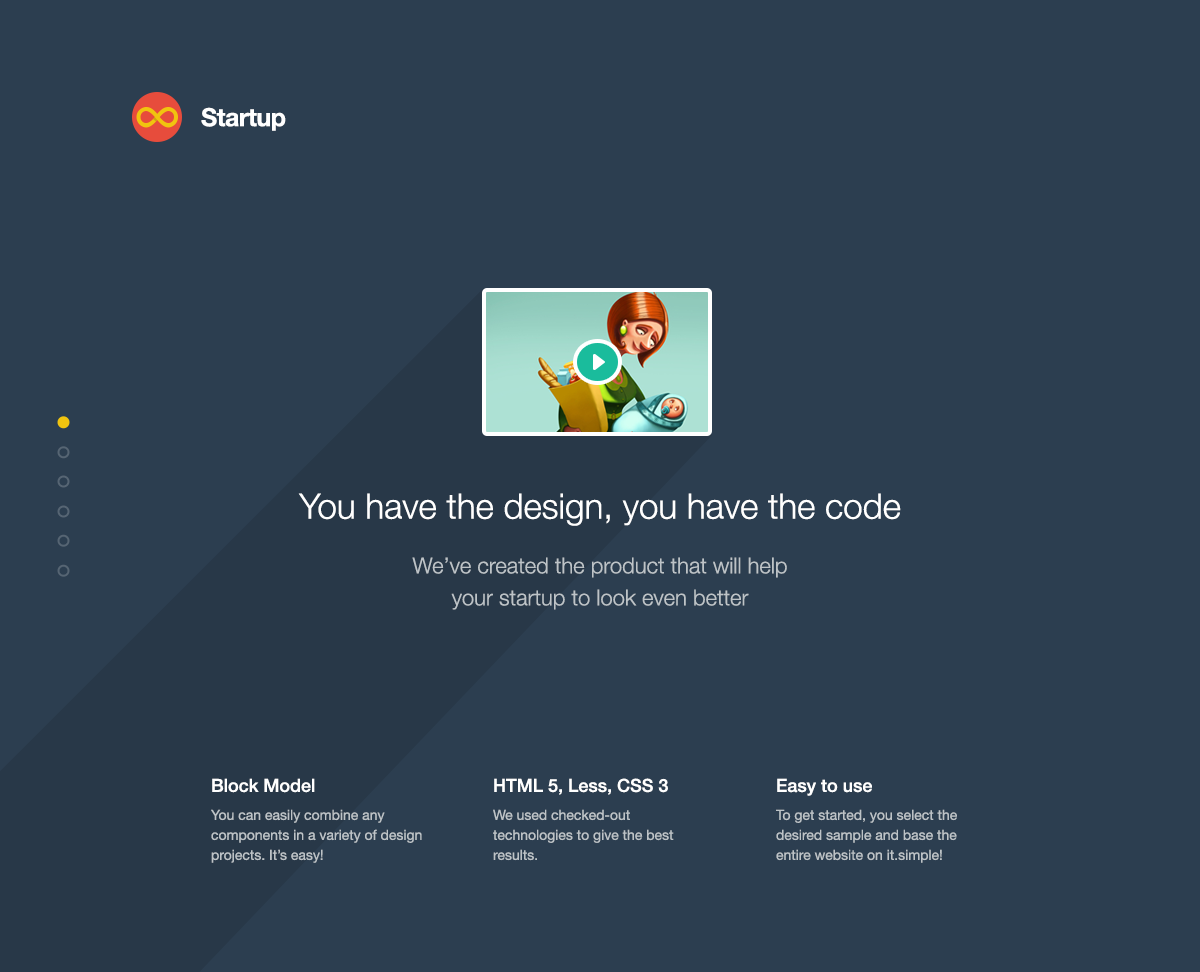
<style>
.page{position:relative;width:1200px;height:972px;background:#2c3e50}
.page>*{position:absolute;margin:0}
.t1{font:25px "HelveticaNeue-Bold";letter-spacing:-0.02em;color:#ffffff}
.t2{font:35px "HelveticaNeue-Light";color:#ffffff}
.t3{font:22px/32px "HelveticaNeue-Light";color:#bdc3c7}
.t4{font:14px/20px "HelveticaNeue";color:#bdc3c7}
.t5{font:18px/18px "HelveticaNeue-Medium";color:#ffffff}
.t6{font:14px/18px "HelveticaNeue";color:#bdc3c7}
</style>
<div class="page">
<p class="t1" style="left:201px;top:107px;width:85px;height:24px">Startup</p>
<p class="t2" style="left:298px;top:493px;width:603px;height:33px">You have the design, you have the code</p>
<p class="t3" style="left:412px;top:557px;width:375px;height:53px;text-align:center">We’ve created the product that will help <br>your startup to look even better</p>
<p class="t4" style="left:211px;top:778px;width:211px;height:85px"><span class="t5">Block Model<br></span><span class="t6">You can easily combine any </span>components in a variety of design projects. It’s easy!</p>
<p class="t4" style="left:493px;top:778px;width:181px;height:83px"><span class="t5">HTML 5, Less, CSS 3<br></span><span class="t6">We used checked-out </span>technologies to give the best results.</p>
<p class="t4" style="left:776px;top:778px;width:181px;height:85px"><span class="t5">Easy to use<br></span><span class="t6">To get started, you select the </span>desired sample and base the entire website on it.<span class="t6">simple!</span></p>
</div>
